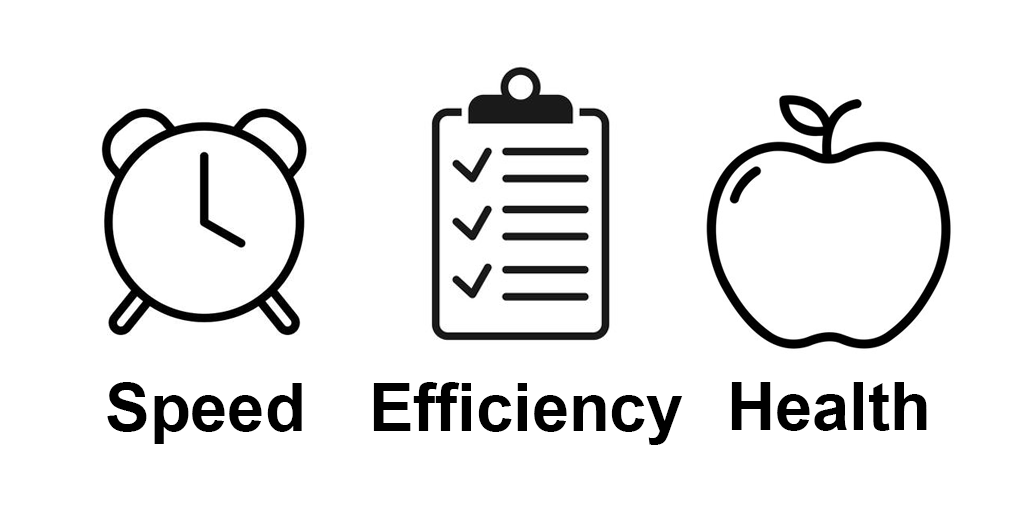
<style>
.page{position:relative;width:1028px;height:512px;background:#ffffff}
.page>*{position:absolute;margin:0}
.t1{font:66.7px "Arial-BoldMT";color:#000000}
</style>
<div class="page">
<p class="t1" style="left:107px;top:382px;width:195px;height:62px">Speed</p>
<p class="t1" style="left:373px;top:382px;width:310px;height:63px">Efficiency</p>
<p class="t1" style="left:731px;top:382px;width:196px;height:49px">Health</p>
</div>
